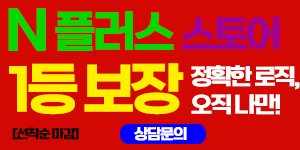
<style>
.page{position:relative;width:300px;height:150px;background:#d30803}
.page>*{position:absolute;margin:0}
.t1{font:45.8px "SBAggroM";letter-spacing:-0.1em;color:#05d700;font-variant:small-caps;font-weight:bold}
.t2{font:76.3px "SBAggroM";letter-spacing:-0.1em;color:#05d700;font-variant:small-caps;font-weight:bold}
.t3{font:38.1px "SBAggroM";letter-spacing:-0.1em;color:#9a0299;font-variant:small-caps;font-weight:bold}
.t4{font:57.3px "SBAggroM";letter-spacing:-0.13em;color:#ffef00;font-variant:small-caps;font-weight:bold}
.t5{font:22.9px/28px "SBAggroM";letter-spacing:-0.1em;color:#ffffff;font-variant:small-caps;font-weight:bold}
.t6{font:12.8px "SBAggroM";letter-spacing:-0.1em;color:#000000;font-variant:small-caps;font-weight:bold}
.t7{font:15.1px "SBAggroM";letter-spacing:-0.1em;color:#ffffff;font-variant:small-caps;font-weight:bold}
</style>
<div class="page">
<p class="t1" style="left:8px;top:8px;width:272px;height:43px"><span class="t2">n</span> 플러스 <span class="t3">스토어</span></p>
<p class="t4" style="left:9px;top:63px;width:175px;height:52px">1등 보장</p>
<p class="t5" style="left:190px;top:65px;width:110px;height:50px">정확한 로직, <br>오직 나만!</p>
<p class="t6" style="left:12px;top:127px;width:67px;height:13px">[선착순 마감]</p>
<p class="t7" style="left:134px;top:127px;width:53px;height:14px">상담문의</p>
</div>
